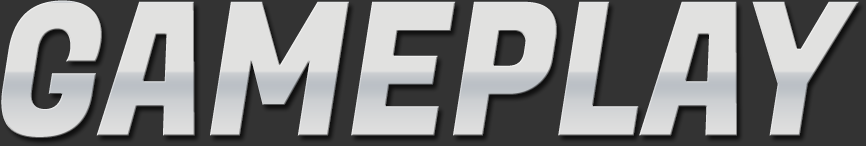
<style>
.page{position:relative;width:866px;height:146px;background:#333333}
.page>*{position:absolute;margin:0}
.t1{font:185.2px "FugazOne-Regular";color:#dfdfdf;scale:0.89 1}
</style>
<div class="page">
<p class="t1" style="left:1px;top:0px;width:858px;height:138px">GAMEPLAY</p>
</div>
